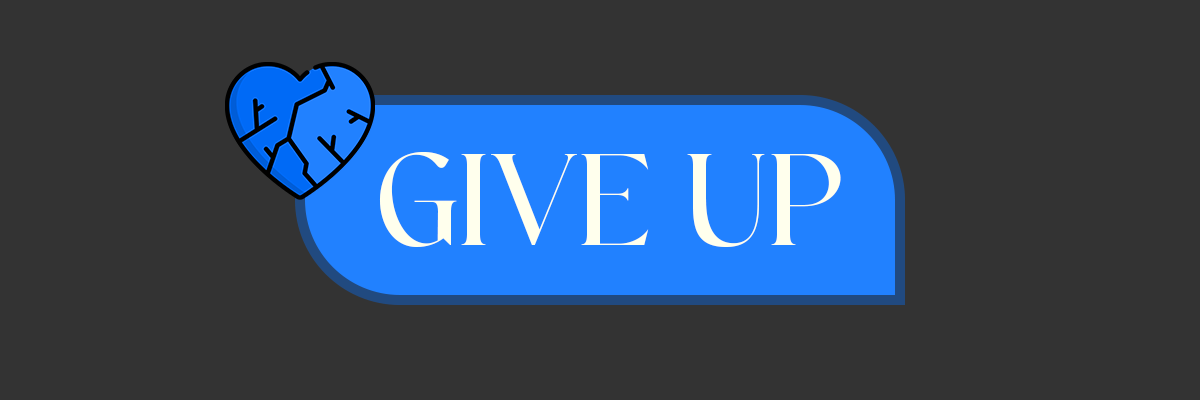
<style>
.page{position:relative;width:1200px;height:400px;background:#333333}
.page>*{position:absolute;margin:0}
.t1{font:130px "BelganAesthetic-Regular";color:#ffffed}
</style>
<div class="page">
<p class="t1" style="left:379px;top:152px;width:462px;height:95px">GIVE UP</p>
</div>
